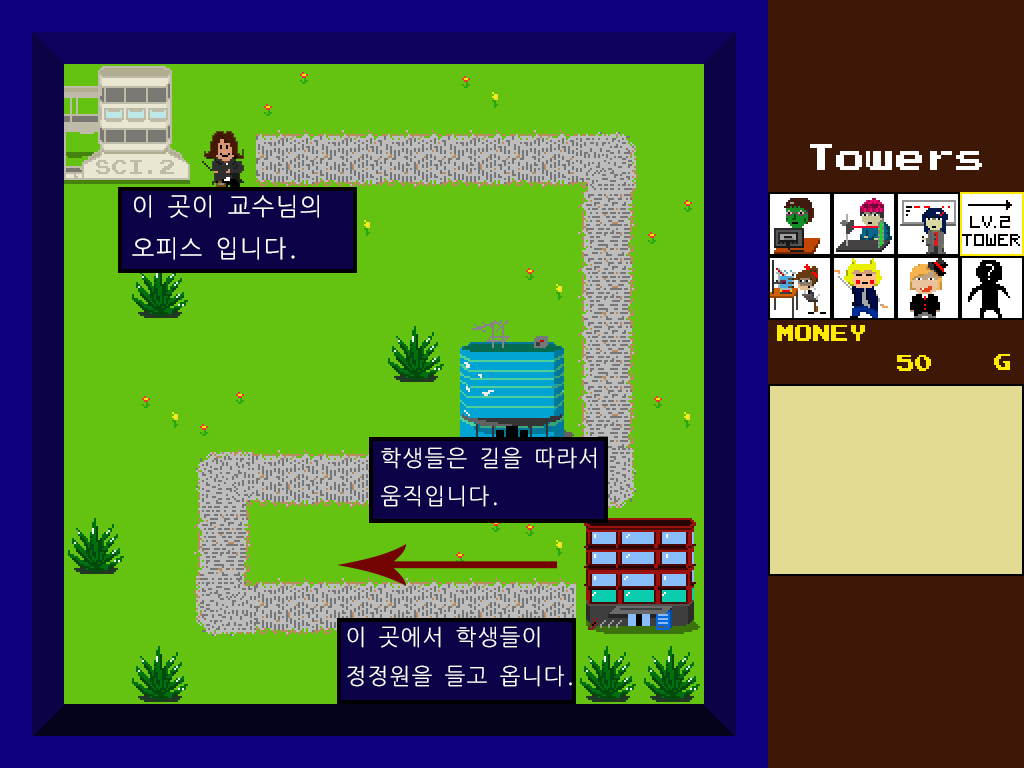
<style>
.page{position:relative;width:1024px;height:768px;background:#64c310}
.page>*{position:absolute;margin:0}
.t1{font:30px "PressStart2P";color:#ffffff}
.t2{font:24px "NanumGothicCoding";color:#ffffff}
.t3{font:18px "PressStart2P";color:#ffea00}
.t4{font:22px "NanumGothicCoding";color:#ffffff}
</style>
<div class="page">
<p class="t1" style="left:810px;top:144px;width:172px;height:26px">Towers</p>
<p class="t2" style="left:132px;top:195px;width:187px;height:65px">이 곳이 교수님의 오피스 입니다.</p>
<p class="t3" style="left:777px;top:325px;width:88px;height:16px">MONEY</p>
<p class="t3" style="left:897px;top:355px;width:34px;height:16px">50</p>
<p class="t3" style="left:994px;top:354px;width:16px;height:16px">G</p>
<p class="t4" style="left:381px;top:447px;width:215px;height:60px">학생들은 길을 따라서<br>움직입니다.</p>
<p class="t4" style="left:347px;top:626px;width:225px;height:61px">이 곳에서 학생들이<br>정정원을 들고 옵니다.</p>
</div>
